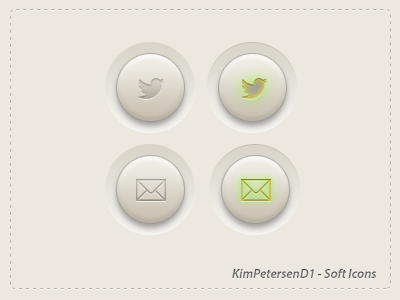
<style>
.page{position:relative;width:400px;height:300px;background:#ece8df}
.page>*{position:absolute;margin:0}
.t1{font:13px "MyriadPro-SemiboldIt";color:#6a6a6a}
</style>
<div class="page">
<p class="t1" style="left:232px;top:268px;width:145px;height:10px">KimPetersenD1 - Soft Icons</p>
</div>
